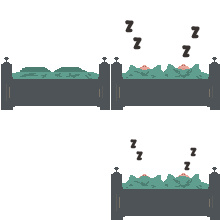
<style>
.page{position:relative;width:220px;height:220px;background:#ffffff}
.page>*{position:absolute;margin:0}
.t1{font:17px "SFWonderComicInline";letter-spacing:-0.01em;color:#37312f}
.t2{font:12.5px "SFWonderComicInline";letter-spacing:-0.01em;color:#37312f}
.t3{font:12px "SFWonderComicInline";letter-spacing:-0.01em;color:#37312f}
</style>
<div class="page">
<p class="t1" style="left:125px;top:20px;width:9px;height:13px">z</p>
<p class="t1" style="left:191px;top:26px;width:9px;height:13px">z</p>
<p class="t1" style="left:133px;top:37px;width:9px;height:13px">z</p>
<p class="t1" style="left:182px;top:45px;width:9px;height:13px">z</p>
<p class="t2" style="left:130px;top:139px;width:7px;height:10px">z</p>
<p class="t3" style="left:190px;top:147px;width:7px;height:10px">z</p>
<p class="t2" style="left:136px;top:151px;width:7px;height:10px">z</p>
<p class="t3" style="left:184px;top:161px;width:7px;height:10px">z</p>
</div>
